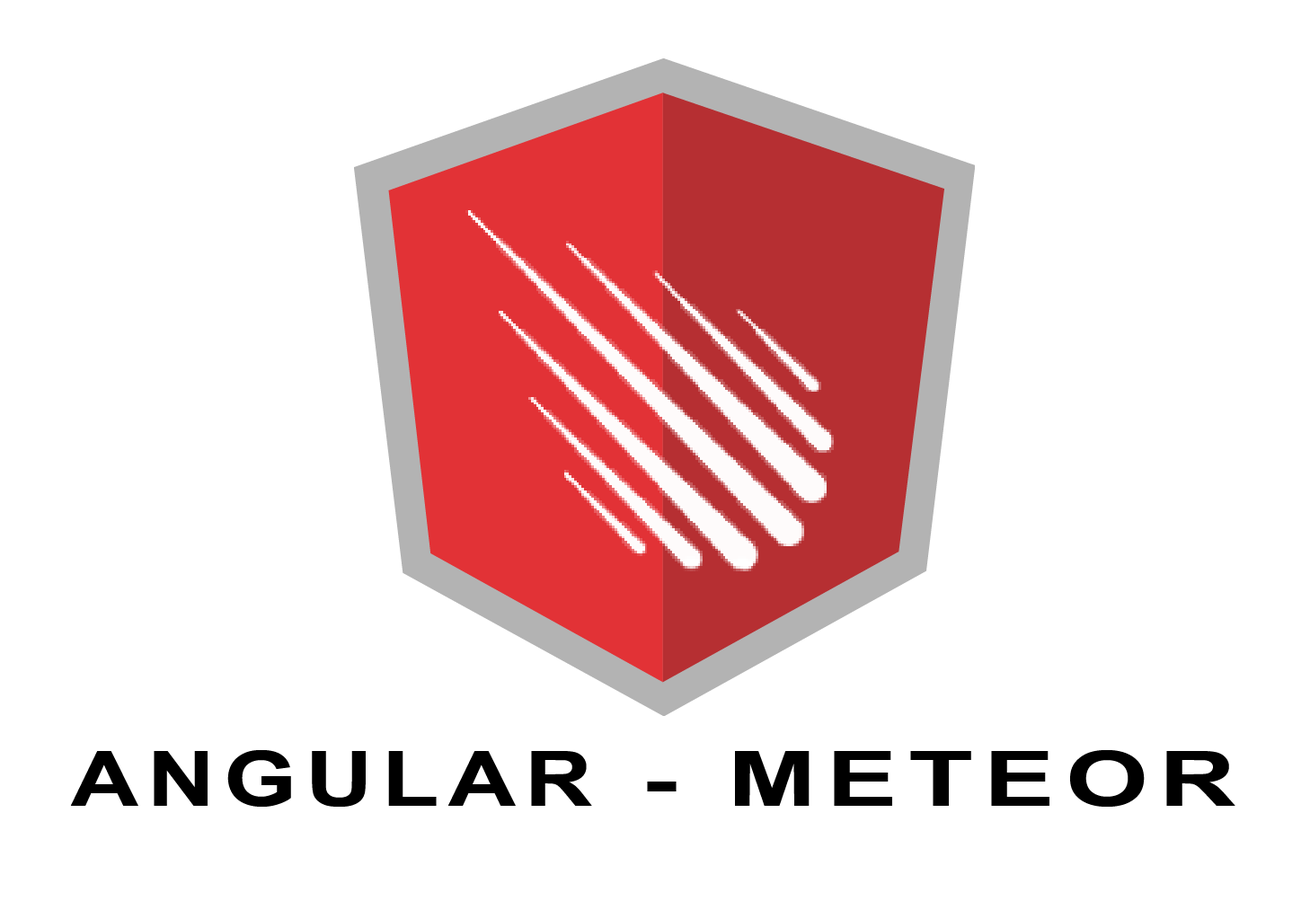
<style>
.page{position:relative;width:1310px;height:910px;background:#ffffff}
.page>*{position:absolute;margin:0}
.t1{font:76.4px "Arial-BoldMT";letter-spacing:0.1em;color:#000000;text-transform:uppercase;scale:1.22 1}
.t2{font:76.4px "Arial-BoldMT";letter-spacing:0.1em;color:#000000;text-transform:uppercase;scale:1.39 1}
.t3{font:76.4px "Arial-BoldMT";letter-spacing:0.1em;color:#000000;scale:1.39 1}
</style>
<div class="page">
<p class="t1" style="left:70px;top:750px;width:1165px;height:57px">Angular<span class="t2"> - </span><span class="t3">M</span><span class="t2">eteor</span></p>
</div>
